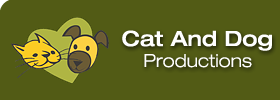
<style>
.page{position:relative;width:280px;height:100px;background:#525b15}
.page>*{position:absolute;margin:0}
.t1{font:21px "HelveticaNeue-MediumExt";color:#ffffff}
.t2{font:18px "HelveticaNeue-LightExt";color:#ffffff}
</style>
<div class="page">
<p class="t1" style="left:122px;top:30px;width:150px;height:21px">Cat And Dog</p>
<p class="t2" style="left:144px;top:54px;width:108px;height:14px">Productions</p>
</div>
